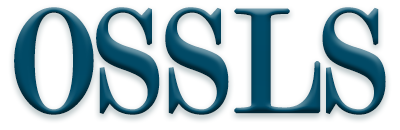
<style>
.page{position:relative;width:400px;height:130px;background:#ffffff}
.page>*{position:absolute;margin:0}
.t1{font:156.2px "Modern-Regular";color:#01506e;font-weight:bold;scale:0.8 1}
</style>
<div class="page">
<p class="t1" style="left:14px;top:7px;width:372px;height:108px">OSSLS</p>
</div>
